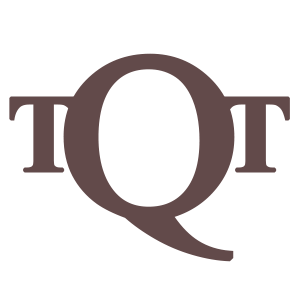
<style>
.page{position:relative;width:300px;height:300px;background:#ffffff}
.page>*{position:absolute;margin:0}
.t1{font:230px "TimesNewRomanPSMT";color:#624a4a;font-weight:bold;scale:1.1 1}
.t2{font:110px "TimesNewRomanPS-BoldMT";letter-spacing:0.11em;color:#624a4a;font-weight:bold}
</style>
<div class="page">
<p class="t1" style="left:63px;top:53px;width:172px;height:209px">Q</p>
<p class="t2" style="left:9px;top:96px;width:281px;height:77px">T   T</p>
</div>
